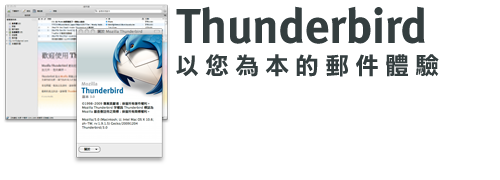
<style>
.page{position:relative;width:500px;height:180px;background:#ffffff}
.page>*{position:absolute;margin:0}
.t1{font:49px "MetaBold-Roman";letter-spacing:-0.01em;color:#343e40}
.t2{font:24px "DFLiHeiStd-W7";letter-spacing:0.25em;color:#343e40}
</style>
<div class="page">
<p class="t1" style="left:176px;top:6px;width:249px;height:38px">Thunderbird</p>
<p class="t2" style="left:176px;top:54px;width:263px;height:23px">以您為本的郵件體驗</p>
</div>
